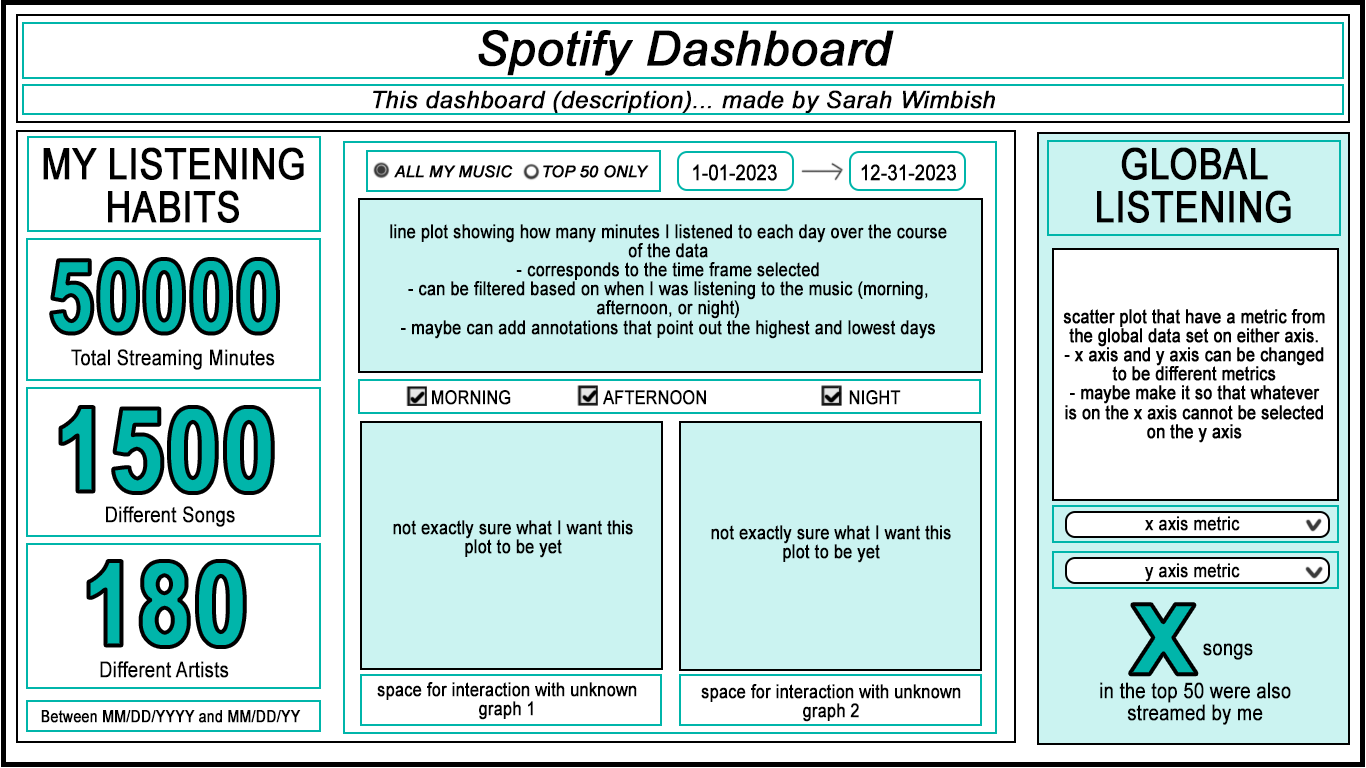
<style>
.page{position:relative;width:1366px;height:768px;background:#ffffff}
.page>*{position:absolute;margin:0}
.t1{font:48px "Arial-ItalicMT";color:#000000;font-weight:bold}
.t2{font:24px "Arial-ItalicMT";color:#000000;font-weight:bold}
.t3{font:43.2px "ArialMT";color:#000000;font-weight:bold;scale:0.83 1}
.t4{font:19.2px "ArialMT";color:#000000;font-weight:bold;scale:0.83 1}
.t5{font:100px "Arial-BoldMT";color:#00b5aa;font-weight:bold;scale:0.8 1}
.t6{font:21.6px "ArialMT";color:#000000;font-weight:bold;scale:0.83 1}
.t7{font:115.2px "Arial-BoldMT";color:#00b5aa;font-weight:bold;scale:0.83 1}
.t8{font:96px "Arial-BoldMT";color:#00b5aa;font-weight:bold}
.t9{font:16.8px "ArialMT";color:#000000;font-weight:bold;scale:0.83 1}
</style>
<div class="page">
<p class="t1" style="left:478px;top:30px;width:416px;height:46px">Spotify Dashboard</p>
<p class="t2" style="left:373px;top:90px;width:622px;height:24px">This dashboard (description)... made by Sarah Wimbish</p>
<p class="t3" style="left:43px;top:147px;width:261px;height:76px;text-align:center">MY LISTENING <br>HABITS</p>
<p class="t3" style="left:1097px;top:147px;width:194px;height:76px;text-align:center">GLOBAL<br>LISTENING</p>
<p class="t4" style="left:390px;top:224px;width:557px;height:115px;text-align:center">line plot showing how many minutes I listened to each day over the course of the data  <br>- corresponds to the time frame selected<br>- can be filtered based on when I was listening to the music (morning, afternoon, or night)<br>- maybe can add annotations that point out the highest and lowest days</p>
<p class="t5" style="left:51px;top:259px;width:227px;height:75px">50000</p>
<p class="t6" style="left:71px;top:349px;width:204px;height:21px">Total Streaming Minutes</p>
<p class="t4" style="left:432px;top:390px;width:469px;height:15px">MORNING                   AFTERNOON                             NIGHT</p>
<p class="t7" style="left:60px;top:407px;width:213px;height:86px">1500</p>
<p class="t6" style="left:106px;top:506px;width:129px;height:21px">Different Songs</p>
<p class="t4" style="left:393px;top:520px;width:240px;height:38px;text-align:center">not exactly sure what I want this plot to be yet</p>
<p class="t4" style="left:1145px;top:516px;width:95px;height:15px">x axis metric</p>
<p class="t4" style="left:711px;top:525px;width:240px;height:38px;text-align:center">not exactly sure what I want this plot to be yet</p>
<p class="t7" style="left:88px;top:561px;width:157px;height:86px">180</p>
<p class="t4" style="left:1145px;top:563px;width:95px;height:19px">y axis metric</p>
<p class="t8" style="left:1130px;top:604px;width:67px;height:71px">X</p>
<p class="t6" style="left:1100px;top:643px;width:191px;height:82px;text-align:center">songs<br><br>in the top 50 were also <br>streamed by me</p>
<p class="t6" style="left:100px;top:661px;width:129px;height:17px">Different Artists</p>
<p class="t4" style="left:377px;top:682px;width:260px;height:38px;text-align:center">space for interaction with unknown graph 1</p>
<p class="t4" style="left:701px;top:684px;width:260px;height:38px;text-align:center">space for interaction with unknown graph 2</p>
<p class="t9" style="left:41px;top:710px;width:260px;height:13px">Between MM/DD/YYYY and MM/DD/YY</p>
</div>
